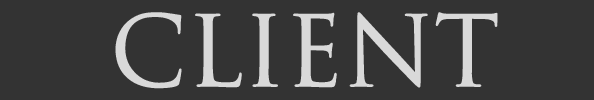
<style>
.page{position:relative;width:594px;height:100px;background:#333333}
.page>*{position:absolute;margin:0}
.t1{font:95.5px "SpaceandAstronomy";color:#d9d9d9}
</style>
<div class="page">
<p class="t1" style="left:115px;top:12px;width:383px;height:77px">Client</p>
</div>
